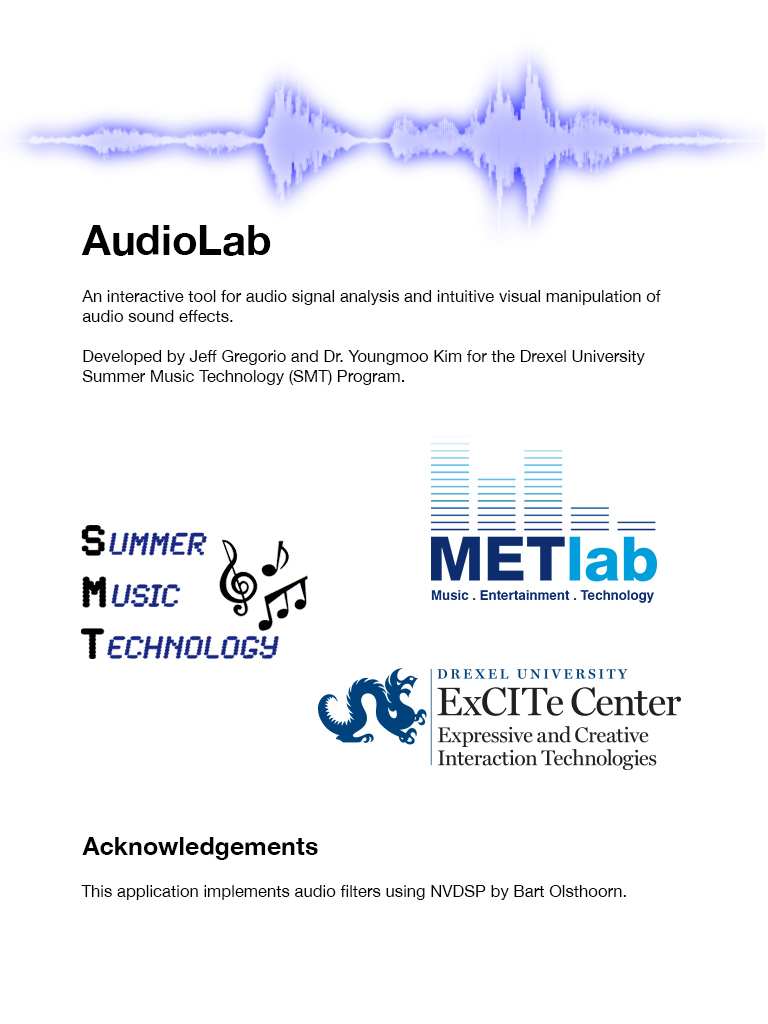
<style>
.page{position:relative;width:768px;height:1024px;background:#ffffff}
.page>*{position:absolute;margin:0}
.t1{font:41.7px "HelveticaNeue-Bold";color:#000000}
.t2{font:16.7px "HelveticaNeue";color:#000000}
.t3{font:25px "HelveticaNeue-Bold";color:#000000}
</style>
<div class="page">
<p class="t1" style="left:81px;top:225px;width:190px;height:31px">AudioLab</p>
<p class="t2" style="left:82px;top:290px;width:579px;height:95px;text-align:justify">An interactive tool for audio signal analysis and intuitive visual manipulation of<br>audio sound effects.<br><br>Developed by Jeff Gregorio and Dr. Youngmoo Kim for the Drexel University <br>Summer Music Technology (SMT) Program.</p>
<p class="t3" style="left:82px;top:837px;width:236px;height:23px">Acknowledgements</p>
<p class="t2" style="left:81px;top:885px;width:545px;height:15px">This application implements audio filters using NVDSP by Bart Olsthoorn.</p>
</div>
